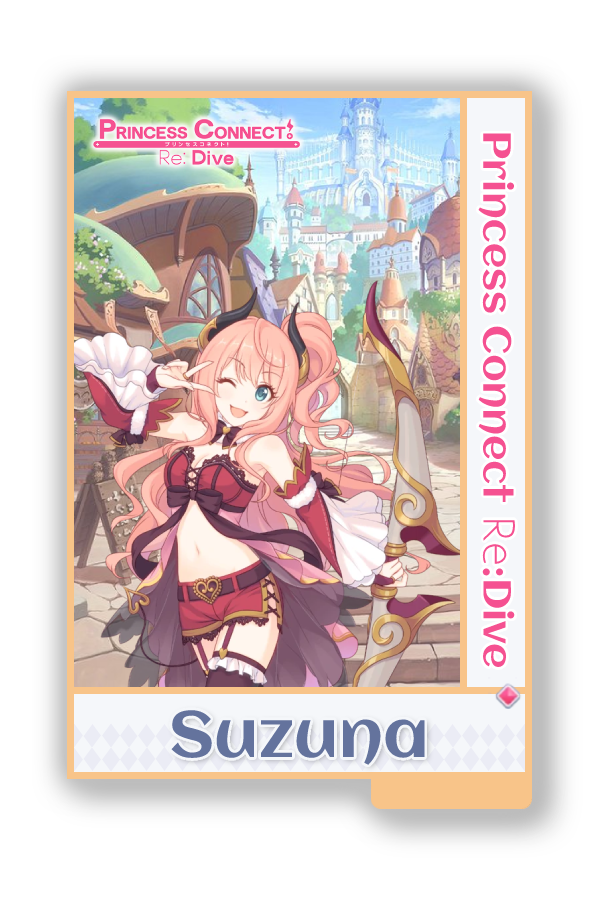
<style>
.page{position:relative;width:600px;height:900px;background:#ffffff}
.page>*{position:absolute;margin:0}
.t1{font:39px "Aclonica-Regular";color:#f55191}
.t2{font:39px "AaarghNormal";color:#f55191}
.t3{font:65px "Aclonica-Regular";color:#64739d}
</style>
<div class="page">
<p class="t1" style="left:478px;top:133px;width:38px;height:534px;rotate:90deg">Princess Connect <span class="t2">Re</span>:Dive</p>
<p class="t3" style="left:171px;top:710px;width:254px;height:55px">Suzuna</p>
</div>
